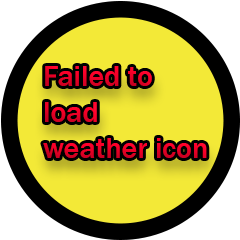
<style>
.page{position:relative;width:240px;height:240px;background:#f3e937}
.page>*{position:absolute;margin:0}
.t1{font:30px "FranklinGothic-Medium"}
</style>
<div class="page">
<p class="t1" style="left:43px;top:66px;width:164px;height:92px">Failed to<br>load<br>weather icon</p>
</div>
